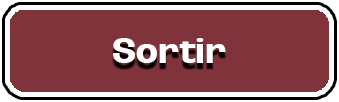
<style>
.page{position:relative;width:339px;height:102px;background:#80333b}
.page>*{position:absolute;margin:0}
.t1{font:33.8px "Oddlini-ExtraBold";color:#ffffff}
</style>
<div class="page">
<p class="t1" style="left:113px;top:38px;width:113px;height:25px">Sortir</p>
</div>
